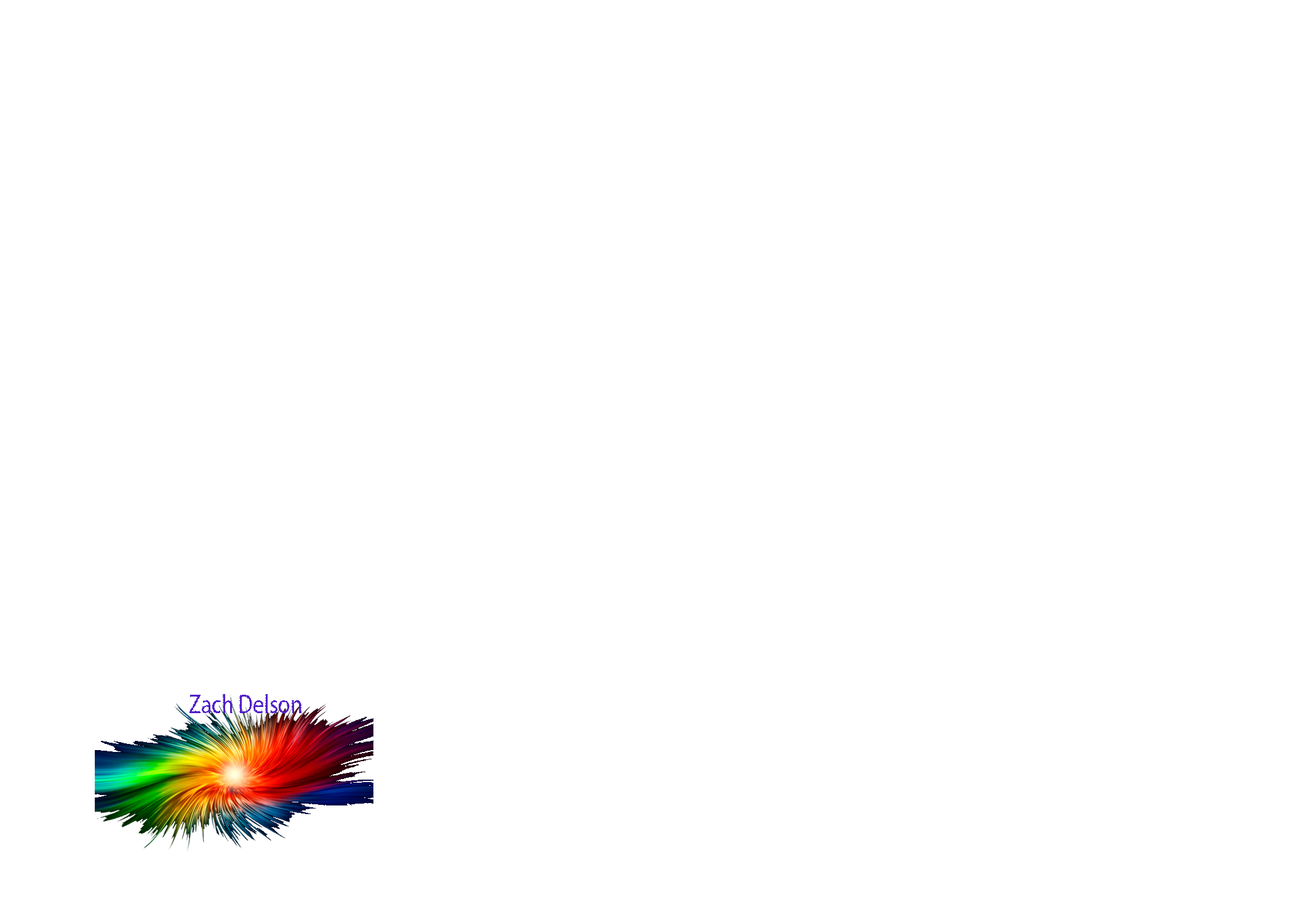
<style>
.page{position:relative;width:1292px;height:923px;background:#ffffff}
.page>*{position:absolute;margin:0}
.t1{font:26.5px "MyriadPro-Regular";color:#5020c9;scale:0.83 1}
</style>
<div class="page">
<p class="t1" style="left:190px;top:694px;width:111px;height:19px">Zach Delson</p>
</div>
